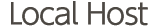
<style>
.page{position:relative;width:157px;height:27px;background:#ffffff}
.page>*{position:absolute;margin:0}
.t1{font:28px "UDShinGoPro-Light";letter-spacing:-0.04em;color:#4c4843;font-weight:bold}
</style>
<div class="page">
<p class="t1" style="left:11px;top:1px;width:137px;height:25px">Local Host</p>
</div>
